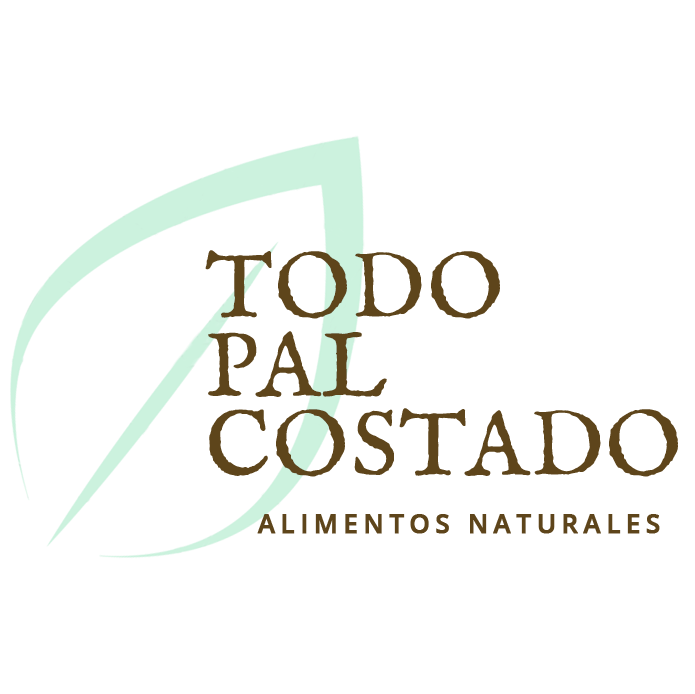
<style>
.page{position:relative;width:695px;height:694px;background:#ffffff}
.page>*{position:absolute;margin:0}
.t1{font:92.6px/79px "IM_FELL_English_SC";letter-spacing:0.015em;color:#5e451b}
.t2{font:25.6px "OpenSans-Semibold";letter-spacing:0.2em;color:#5e451b;font-weight:bold}
</style>
<div class="page">
<p class="t1" style="left:205px;top:250px;width:473px;height:227px">TODO<br>PAL<br>COSTADO</p>
<p class="t2" style="left:257px;top:514px;width:403px;height:20px">ALIMENTOS NATURALES</p>
</div>
